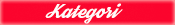
<style>
.page{position:relative;width:175px;height:25px;background:#fb042d}
.page>*{position:absolute;margin:0}
.t1{font:14.2px "Streetwear";color:#fdfcfc;scale:1.07 1}
</style>
<div class="page">
<p class="t1" style="left:45px;top:3px;width:78px;height:21px">Kategori</p>
</div>
